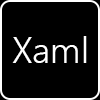
<style>
.page{position:relative;width:100px;height:100px;background:#000000}
.page>*{position:absolute;margin:0}
.t1{font:36px "SegoeUI-Semilight";color:#ffffff}
</style>
<div class="page">
<p class="t1" style="left:12px;top:36px;width:75px;height:27px">Xaml</p>
</div>
